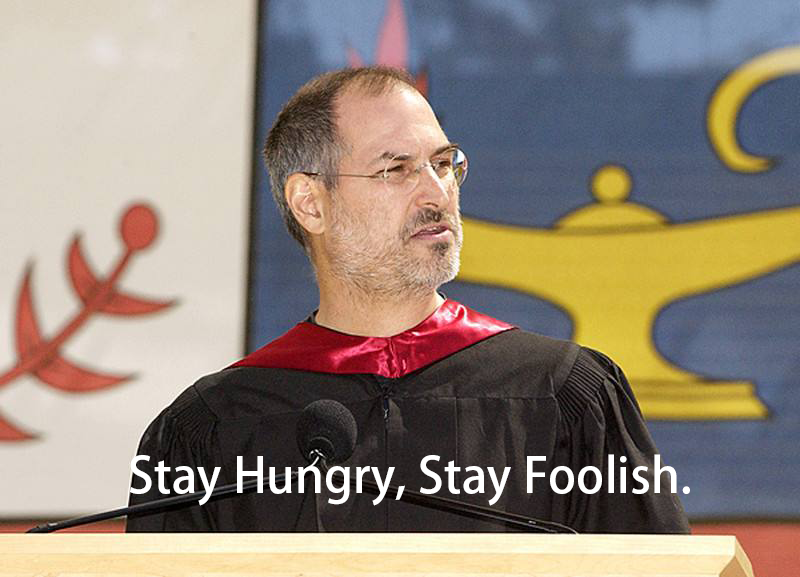
<style>
.page{position:relative;width:800px;height:577px}
.page>*{position:absolute;margin:0}
.t1{font:48px "AdobeHeitiStd-Regular";color:#ffffff}
</style>
<div class="page">
<p class="t1" style="left:130px;top:454px;width:560px;height:52px">Stay Hungry, Stay Foolish.</p>
</div>
